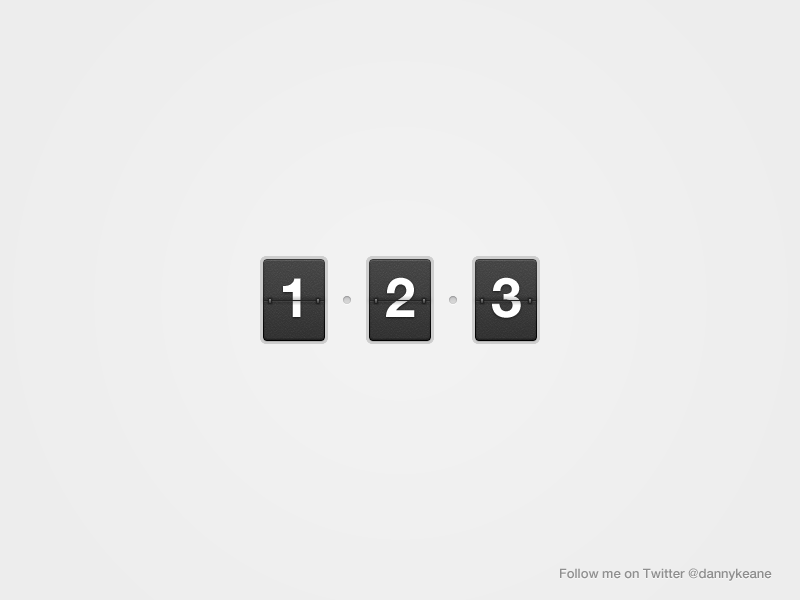
<style>
.page{position:relative;width:800px;height:600px;background:#eeeeee}
.page>*{position:absolute;margin:0}
.t1{font:55px "HelveticaNeue-Bold";letter-spacing:-0.02em;color:#ffffff}
.t2{font:13px "HelveticaNeue-Medium";color:#8f8f8f}
</style>
<div class="page">
<p class="t1" style="left:283px;top:278px;width:18px;height:39px">1</p>
<p class="t1" style="left:386px;top:277px;width:29px;height:40px">2</p>
<p class="t1" style="left:492px;top:277px;width:29px;height:41px">3</p>
<p class="t2" style="left:560px;top:568px;width:212px;height:13px">Follow me on Twitter @dannykeane</p>
</div>
